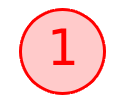
<style>
.page{position:relative;width:120px;height:110px;background:#ffffff}
.page>*{position:absolute;margin:0}
.t1{font:50px "DejaVuSans";color:#ff0000}
</style>
<div class="page">
<p class="t1" style="left:52px;top:28px;width:23px;height:37px">1</p>
</div>
